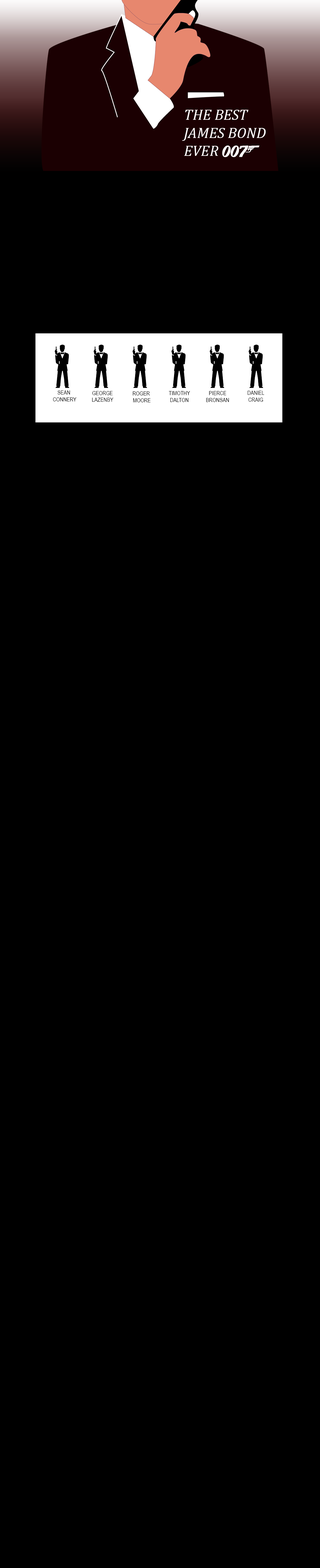
<style>
.page{position:relative;width:320px;height:1568px;background:#000000}
.page>*{position:absolute;margin:0}
.t1{font:15.1px "Cambria-Italic";color:#ffffff}
.t2{font:15.1px "BabesandBond";color:#ffffff}
.t3{font:35.1px "BabesandBond";color:#000000}
.t4{font:5.7px "ArialNarrow";color:#000000}
</style>
<div class="page">
<p class="t1" style="left:182px;top:110px;width:84px;height:46px">THE BEST<br>JAMES BOND <br>EVER</p>
<p class="t2" style="left:222px;top:146px;width:37px;height:11px">7</p>
<p class="t3" style="left:55px;top:345px;width:14px;height:43px">r</p>
<p class="t3" style="left:93px;top:345px;width:15px;height:43px">r</p>
<p class="t3" style="left:132px;top:345px;width:15px;height:43px">r</p>
<p class="t3" style="left:171px;top:345px;width:15px;height:43px">r</p>
<p class="t3" style="left:209px;top:345px;width:15px;height:43px">r</p>
<p class="t3" style="left:248px;top:345px;width:15px;height:43px">r</p>
<p class="t4" style="left:53px;top:390px;width:24px;height:11px;text-align:center">SEAN <br>CONNERY</p>
<p class="t4" style="left:92px;top:391px;width:21px;height:11px;text-align:center">GEORGE <br>LAZENBY</p>
<p class="t4" style="left:133px;top:391px;width:18px;height:11px;text-align:center">ROGER <br>MOORE</p>
<p class="t4" style="left:169px;top:391px;width:21px;height:11px;text-align:center">TIMOTHY<br>DALTON</p>
<p class="t4" style="left:206px;top:391px;width:23px;height:11px;text-align:center">PIERCE<br>BRONSAN</p>
<p class="t4" style="left:247px;top:391px;width:17px;height:11px;text-align:center">DANIEL<br>CRAIG</p>
</div>
